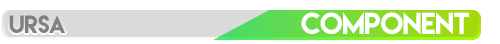
<style>
.page{position:relative;width:500px;height:44px;background:#ffffff}
.page>*{position:absolute;margin:0}
.t1{font:22.4px "LemonMilk";letter-spacing:-0.02em;color:#7b7b7b}
.t2{font:27.1px "LemonMilk";letter-spacing:-0.02em;color:#ffffff}
</style>
<div class="page">
<p class="t1" style="left:9px;top:15px;width:56px;height:18px">URSA</p>
<p class="t2" style="left:301px;top:12px;width:168px;height:23px">component</p>
</div>
